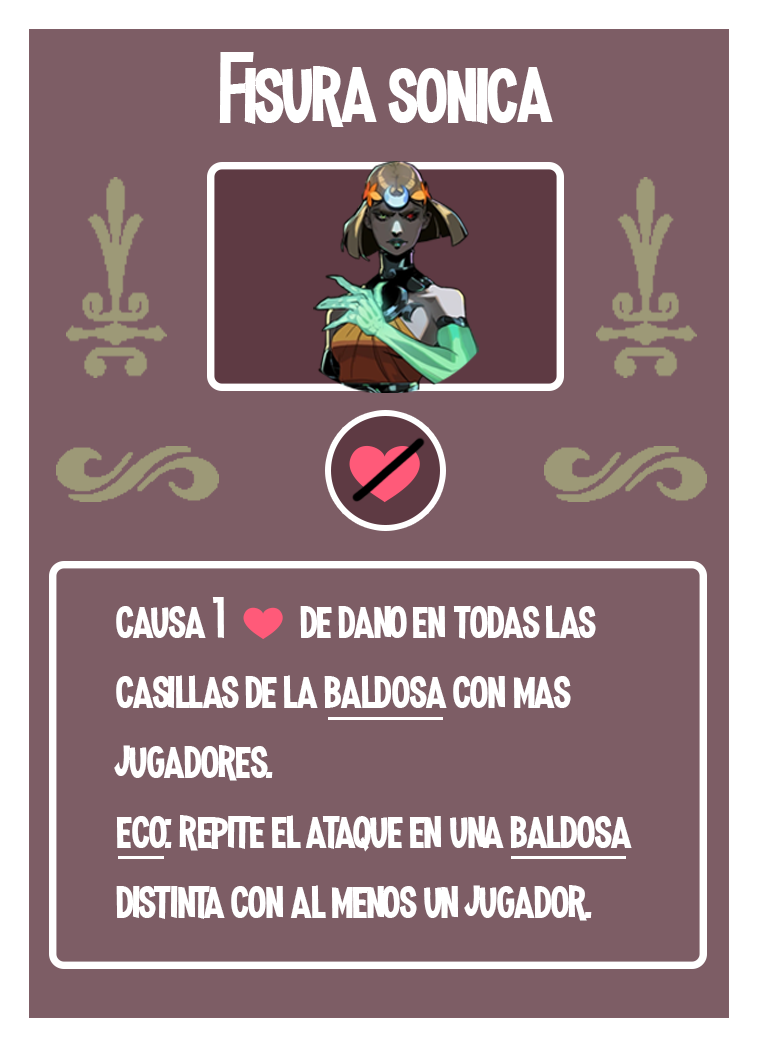
<style>
.page{position:relative;width:758px;height:1047px;background:#7d5d65}
.page>*{position:absolute;margin:0}
.t1{font:100px "MadnessHyperactive";color:#ffffff}
.t2{font:58.3px "MadnessHyperactive";color:#ffffff}
.t3{font:41.7px "EmojiOneColor";color:#ffffff}
</style>
<div class="page">
<p class="t1" style="left:219px;top:52px;width:334px;height:75px">Fisura sonica</p>
<p class="t2" style="left:114px;top:597px;width:518px;height:324px">causa 1  <span class="t3">❤️</span>  de dano en todas las casillas de la baldosa con mas jugadores.<br>eco: repite el ataque en una baldosa distinta con al menos un jugador.</p>
</div>
